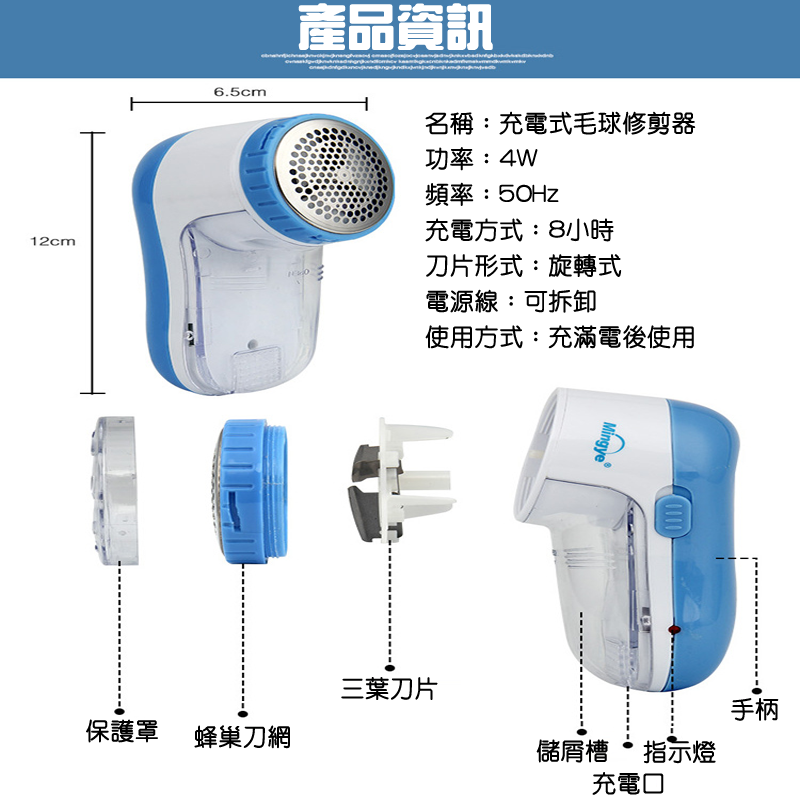
<style>
.page{position:relative;width:800px;height:800px;background:#ffffff}
.page>*{position:absolute;margin:0}
.t1{font:48px "HanWangZonYi";color:#ffffff;font-weight:bold}
.t2{font:24px "HanWangYenLight";color:#000000;font-weight:bold}
</style>
<div class="page">
<p class="t1" style="left:298px;top:3px;width:195px;height:47px">產品資訊</p>
<p class="t2" style="left:425px;top:111px;width:271px;height:238px">名稱：充電式毛球修剪器<br>功率：4W<br>頻率：50Hz<br>充電方式：8小時<br>刀片形式：旋轉式<br>電源線：可拆卸<br>使用方式：充滿電後使用</p>
<p class="t2" style="left:341px;top:677px;width:97px;height:23px">三葉刀片</p>
<p class="t2" style="left:731px;top:698px;width:48px;height:23px">手柄</p>
<p class="t2" style="left:86px;top:719px;width:72px;height:24px">保護罩</p>
<p class="t2" style="left:194px;top:725px;width:96px;height:24px">蜂巢刀網</p>
<p class="t2" style="left:536px;top:739px;width:73px;height:24px">儲屑槽</p>
<p class="t2" style="left:643px;top:740px;width:73px;height:24px">指示燈</p>
<p class="t2" style="left:592px;top:772px;width:72px;height:23px">充電口</p>
</div>
